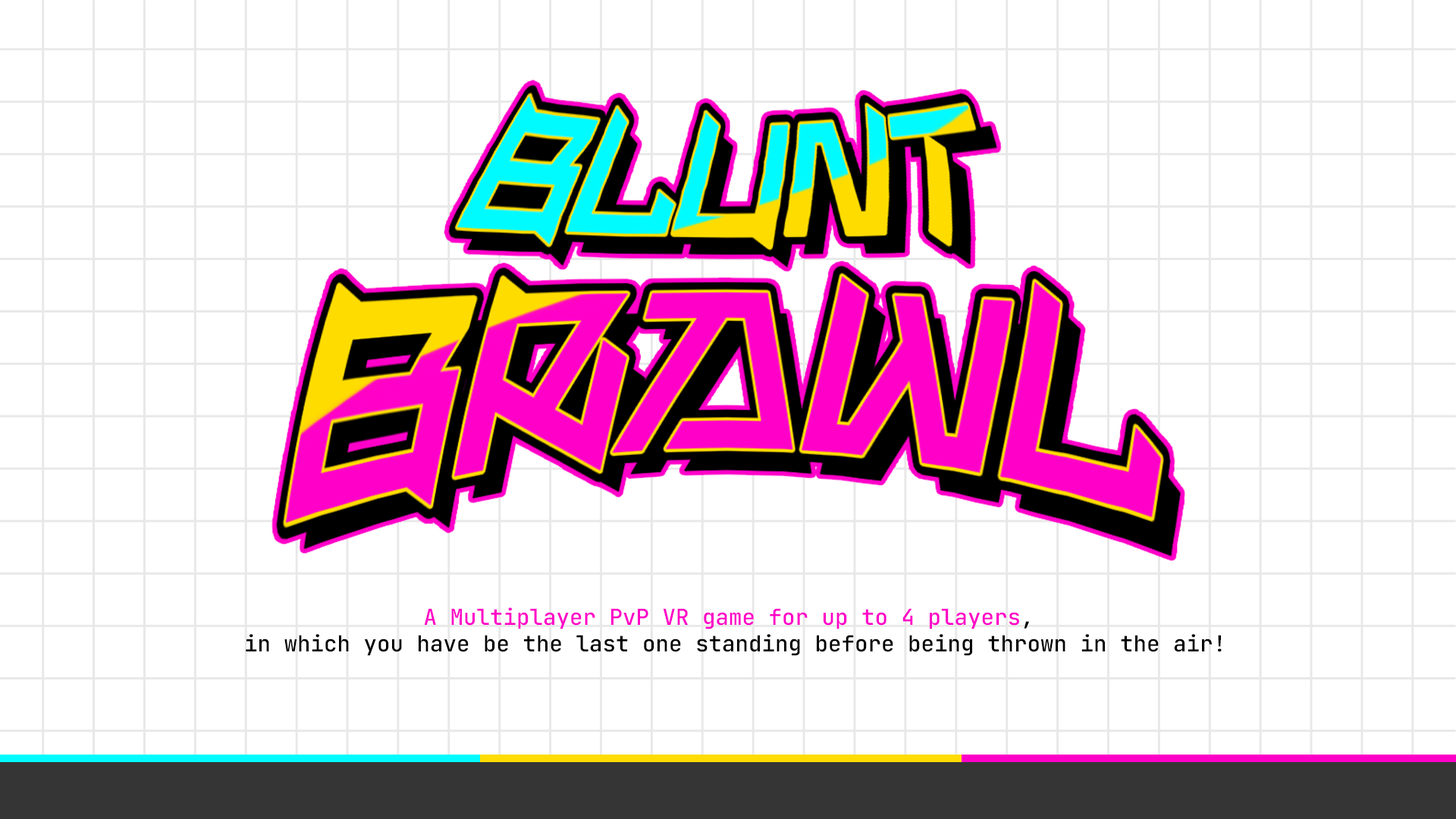
<style>
.page{position:relative;width:1456px;height:819px;background:#ffffff}
.page>*{position:absolute;margin:0}
.t1{font:22.1px "JetBrainsMonoRoman-Medium";color:#000000}
.t2{font:22.1px "JetBrainsMonoRoman-Medium";color:#ff00c8}
</style>
<div class="page">
<p class="t1" style="left:246px;top:607px;width:976px;height:49px;text-align:center"><span class="t2">A Multiplayer PvP VR game for up to 4 players</span>,<br> in which you have be the last one standing before being thrown in the air!</p>
</div>
